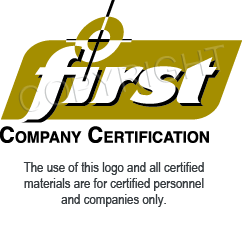
<style>
.page{position:relative;width:242px;height:227px;background:#ffffff}
.page>*{position:absolute;margin:0}
.t1{font:14px/16px "ArialNarrow";color:#373c3f}
</style>
<div class="page">
<p class="t1" style="left:23px;top:162px;width:181px;height:45px;text-align:center">The use of this logo and all certified materials are for certified personnel and companies only.</p>
</div>
